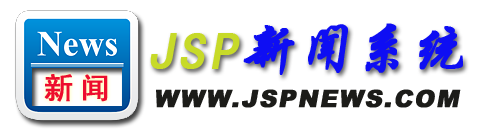
<style>
.page{position:relative;width:500px;height:130px;background:#ffffff}
.page>*{position:absolute;margin:0}
.t1{font:55px "STXingkai";color:#0e0ef3;text-transform:uppercase;font-weight:bold;font-style:italic}
.t2{font:52px "SimHei";letter-spacing:0.075em;color:#c7da29;text-transform:uppercase;font-weight:bold;font-style:italic}
.t3{font:30px "SimHei";letter-spacing:0.2em;color:#ed0d2d;text-transform:uppercase;font-weight:bold}
.t4{font:24px "Arial-Black";letter-spacing:0.05em;color:#1c1c19;text-transform:uppercase;font-weight:bold;font-style:italic}
</style>
<div class="page">
<p class="t1" style="left:150px;top:23px;width:313px;height:52px"><span class="t2">JSP</span>新闻系统</p>
<p class="t3" style="left:44px;top:74px;width:64px;height:28px">新闻</p>
<p class="t4" style="left:156px;top:89px;width:305px;height:19px">www.jspnews.com</p>
</div>
